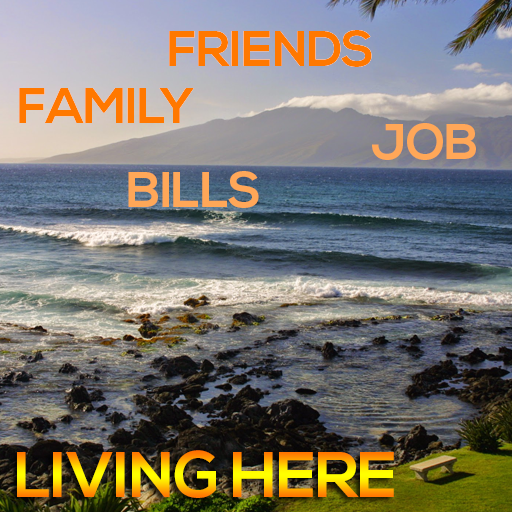
<style>
.page{position:relative;width:512px;height:512px}
.page>*{position:absolute;margin:0}
.t1{font:50.3px "NexaBold";letter-spacing:-0.02em;color:#ff7800}
.t2{font:50.3px "NexaBold";letter-spacing:-0.02em;color:#ffa758}
.t3{font:64.5px "NexaBold";letter-spacing:-0.02em}
</style>
<div class="page">
<p class="t1" style="left:169px;top:30px;width:203px;height:37px">FRIENDS</p>
<p class="t1" style="left:19px;top:88px;width:175px;height:35px">FAMILY</p>
<p class="t2" style="left:372px;top:123px;width:104px;height:37px">JOB</p>
<p class="t2" style="left:128px;top:171px;width:131px;height:37px">BILLS</p>
<p class="t3" style="left:17px;top:450px;width:377px;height:48px">LIVING HERE</p>
</div>
